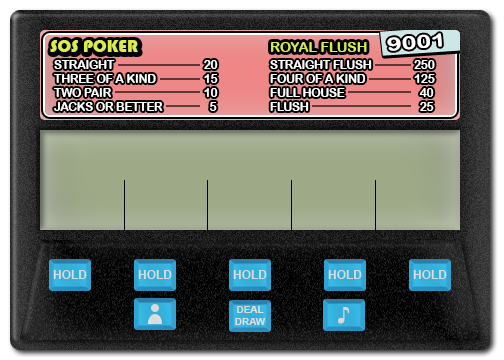
<style>
.page{position:relative;width:504px;height:360px}
.page>*{position:absolute;margin:0}
.t1{font:18px "Bauhaus93";color:#d9ec4e}
.t2{font:18px "ArialRoundedMTBold";color:#ffffff;scale:1.38 1}
.t3{font:14px "ArialRoundedMTBold";color:#d9ec4e}
.t4{font:11.5px "ArialRoundedMTBold";color:#ffffff}
.t5{font:11.5px/14px "ArialRoundedMTBold";color:#ffffff}
.t6{font:10px "Arial-BoldMT";color:#dddddd}
.t7{font:24.3px "Arial-BoldMT";color:#d9d9d9}
</style>
<div class="page">
<p class="t1" style="left:50px;top:40px;width:88px;height:12px">SOS POKER</p>
<p class="t2" style="left:387px;top:33px;width:55px;height:18px;rotate:-5deg">9001</p>
<p class="t3" style="left:271px;top:42px;width:96px;height:10px">ROYAL FLUSH</p>
<p class="t4" style="left:54px;top:60px;width:381px;height:51px">STRAIGHT     20  STRAIGHT FLUSH  250<br>THREE OF A KIND    15  FOUR OF A KIND  125<br>TWO PAIR     10  FULL HOUSE    40<br><span class="t5">JACKS OR BETTER     5  FLUSH     25</span></p>
<p class="t6" style="left:235px;top:306px;width:31px;height:19px;text-align:center">DEAL<br>DRAW</p>
<p class="t7" style="left:338px;top:307px;width:12px;height:17px">♪</p>
</div>
